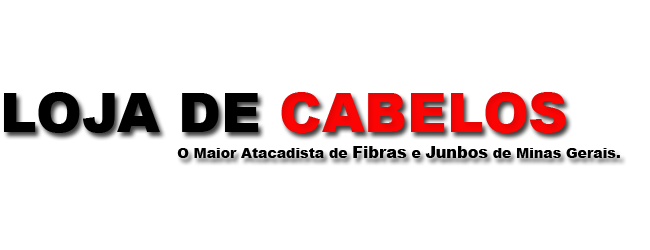
<style>
.page{position:relative;width:650px;height:250px;background:#ffffff}
.page>*{position:absolute;margin:0}
.t1{font:55px "Arial-Black";color:#010000}
.t2{font:55px "Arial-Black";color:#fc0404}
.t3{font:14px "Arial-Black";color:#000000}
.t4{font:16px "Arial-Black";color:#000000}
</style>
<div class="page">
<p class="t1" style="left:4px;top:92px;width:562px;height:41px">LOJA DE <span class="t2">CABELOS</span></p>
<p class="t3" style="left:177px;top:146px;width:443px;height:12px">O Maior Atacadista de <span class="t4">Fibras</span> e <span class="t4">Junbos</span> de Minas Gerais.</p>
</div>
